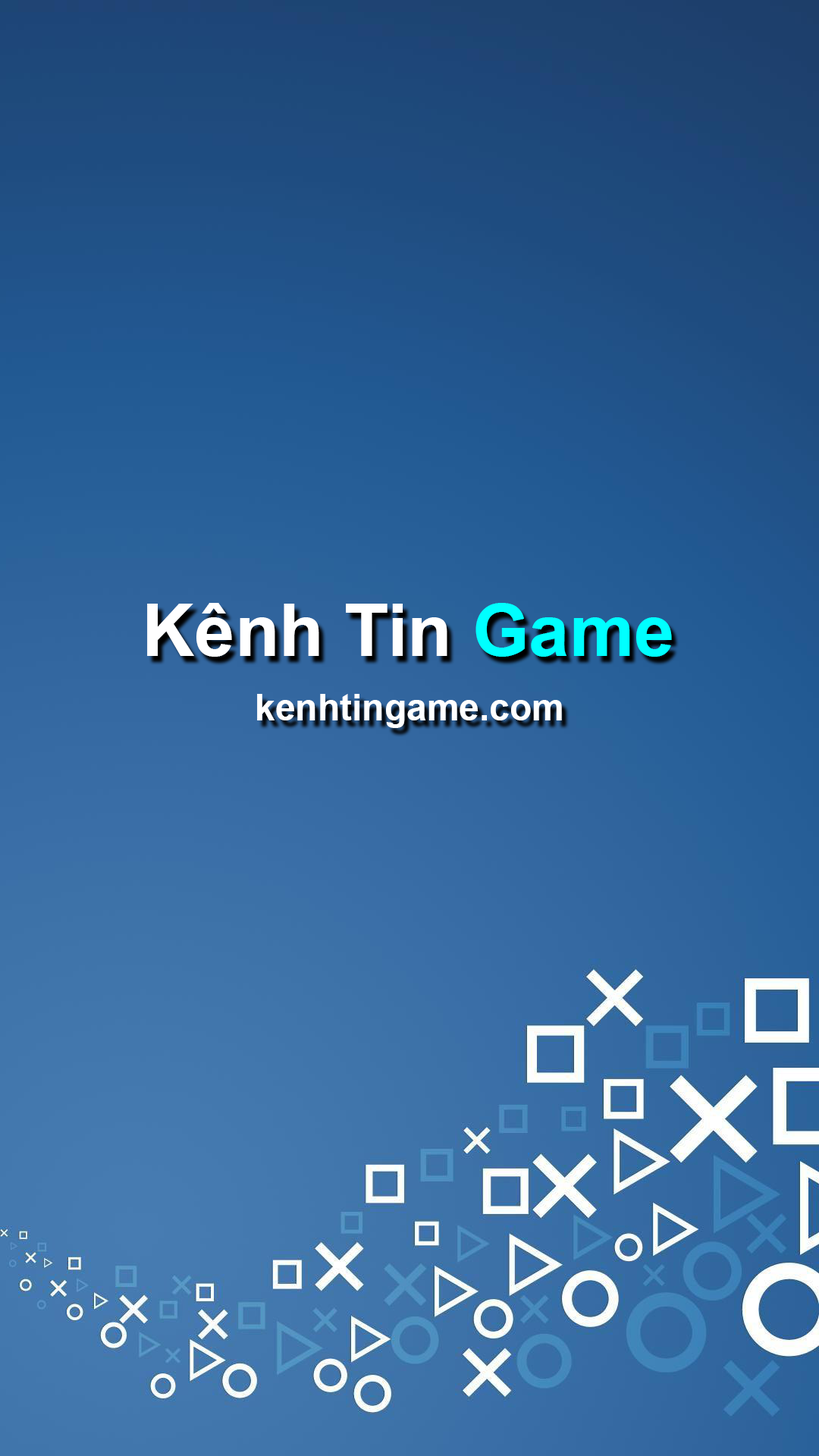
<style>
.page{position:relative;width:819px;height:1456px}
.page>*{position:absolute;margin:0}
.t1{font:72.8px "Arial-BoldMT";color:#ffffff}
.t2{font:72.8px "Arial-BoldMT";color:#00ffff}
.t3{font:36.4px "Arial-BoldMT";color:#ffffff}
</style>
<div class="page">
<p class="t1" style="left:147px;top:603px;width:525px;height:54px">Kênh Tin <span class="t2">Game</span></p>
<p class="t3" style="left:257px;top:694px;width:305px;height:34px">kenhtingame.com</p>
</div>
